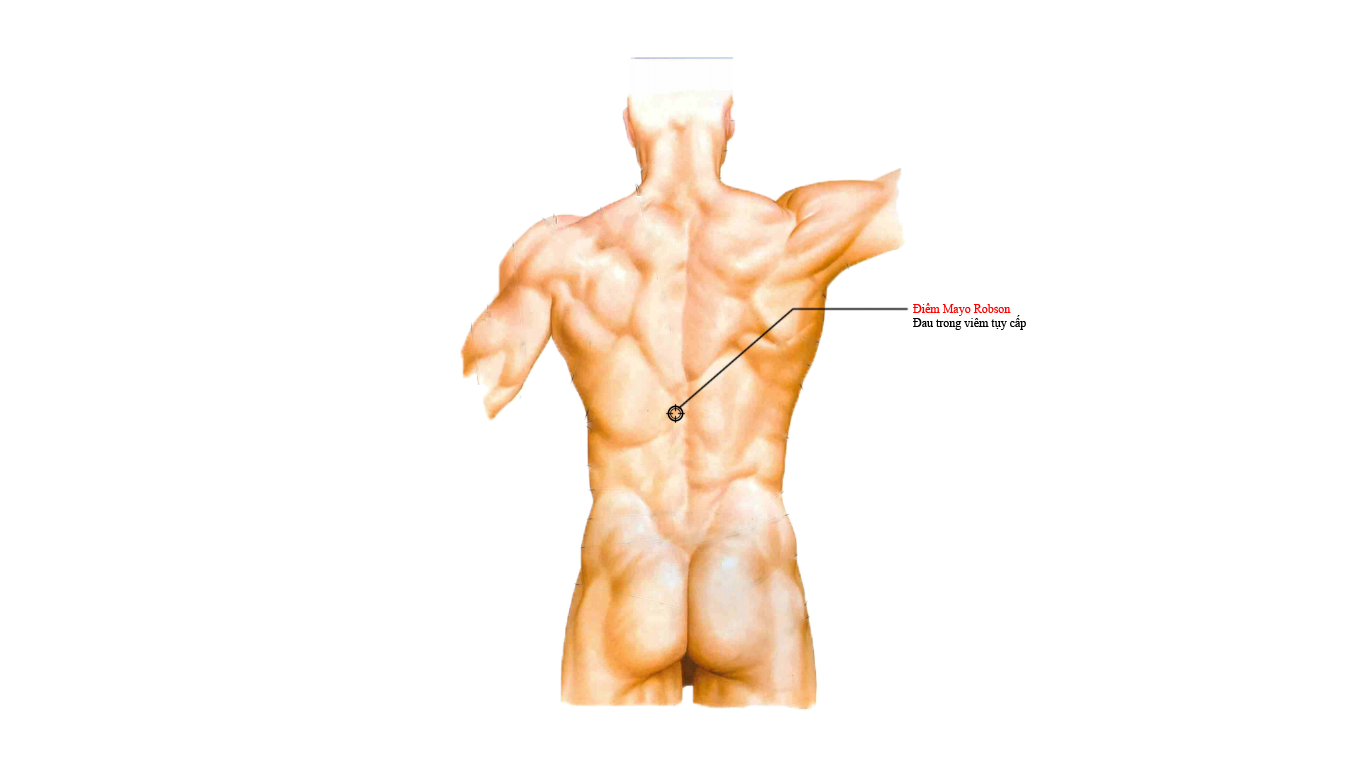
<style>
.page{position:relative;width:1366px;height:768px;background:#ffffff}
.page>*{position:absolute;margin:0}
.t1{font:12px "TimesNewRomanPSMT";color:#000000}
.t2{font:12px "TimesNewRomanPSMT";color:#ff0000}
</style>
<div class="page">
<p class="t1" style="left:913px;top:303px;width:113px;height:27px"><span class="t2">Điểm Mayo Robson<br></span>Đau trong viêm tụy cấp</p>
</div>
